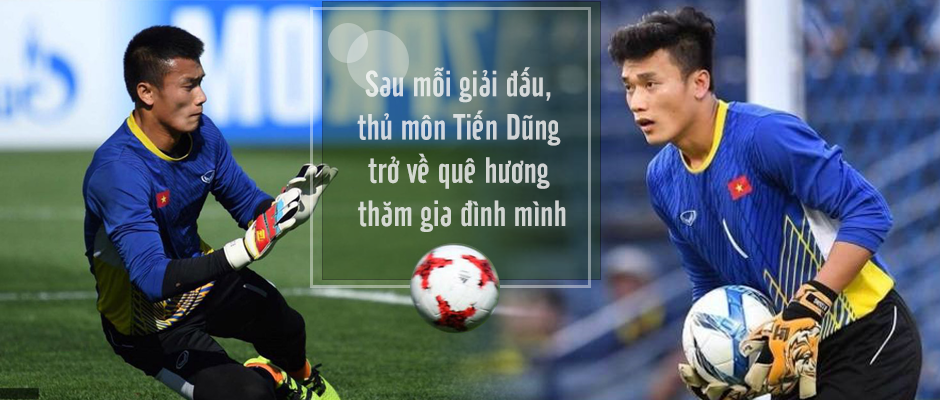
<style>
.page{position:relative;width:940px;height:400px}
.page>*{position:absolute;margin:0}
.t1{font:36px "UTM-Cafeta";color:#d2d7d3}
</style>
<div class="page">
<p class="t1" style="left:357px;top:67px;width:209px;height:165px;text-align:center">Sau mỗi giải đấu,<br>thủ môn Tiến Dũng <br>trở về quê hương <br> thăm gia đình mình</p>
</div>
